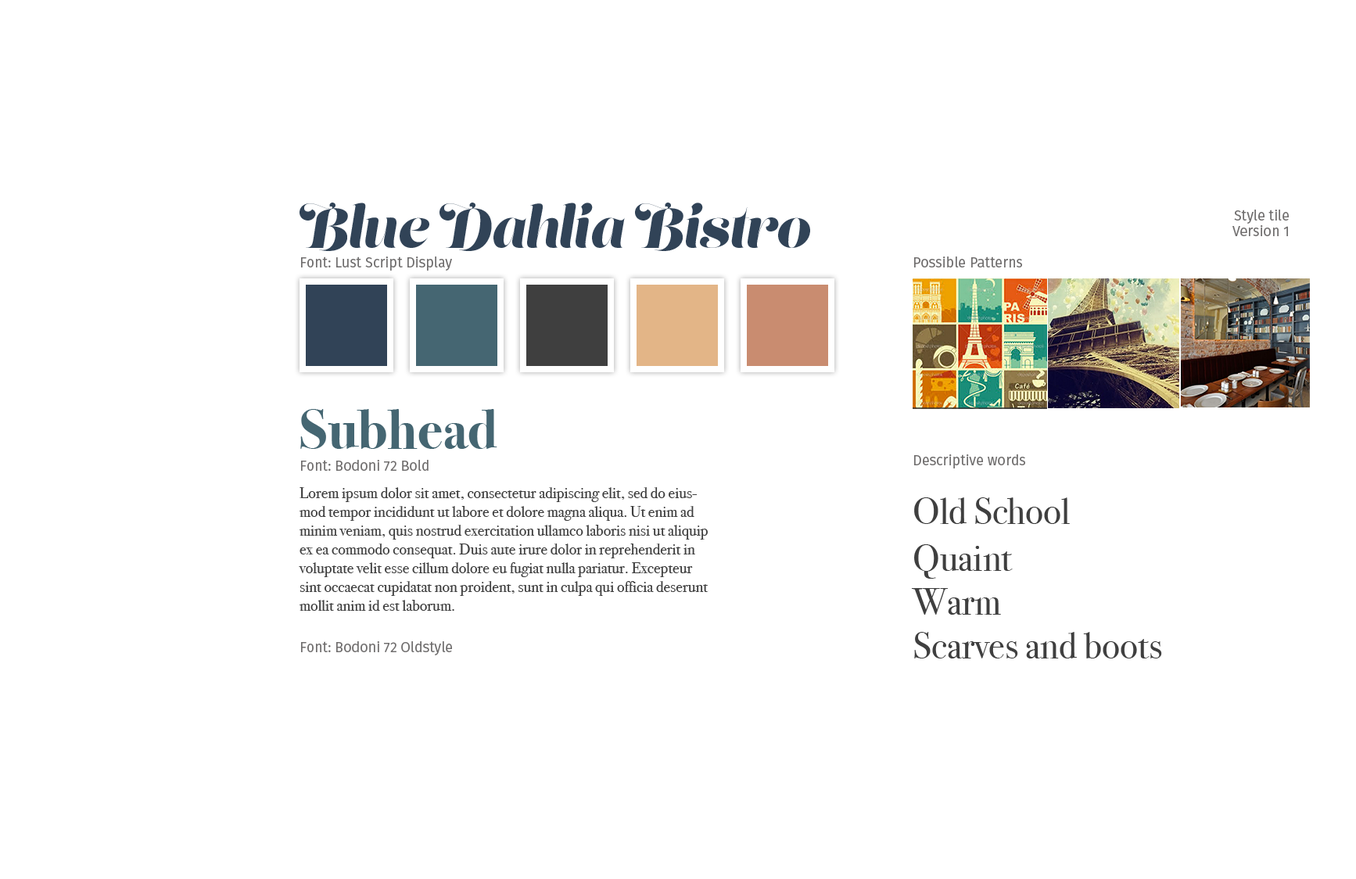
<style>
.page{position:relative;width:1356px;height:879px;background:#ffffff}
.page>*{position:absolute;margin:0}
.t1{font:56.3px "LustScriptDisplay";color:#314357}
.t2{font:14.1px/15.6px "FiraSans-Book";color:#706e6e}
.t3{font:14.1px "FiraSans-Book";color:#706e6e}
.t4{font:56.3px "BodoniSvtyTwoITCTT-Bold";color:#456672}
.t5{font:15.6px/18.8px "BodoniSvtyTwoOSITCTT-Book";color:#3f3f3f}
.t6{font:37.5px "BodoniSvtyTwoITCTT-Book";color:#3f3f3f}
</style>
<div class="page">
<p class="t1" style="left:300px;top:203px;width:510px;height:48px">Blue Dahlia Bistro</p>
<p class="t2" style="left:1233px;top:210px;width:56px;height:26px;text-align:right">Style tile<br>Version 1</p>
<p class="t3" style="left:301px;top:257px;width:151px;height:14px">Font: Lust Script Display</p>
<p class="t3" style="left:914px;top:257px;width:108px;height:11px">Possible Patterns</p>
<p class="t4" style="left:300px;top:409px;width:197px;height:40px">Subhead</p>
<p class="t3" style="left:301px;top:460px;width:128px;height:11px">Font: Bodoni 72 Bold</p>
<p class="t3" style="left:914px;top:454px;width:111px;height:15px">Descriptive words</p>
<p class="t5" style="left:299px;top:487px;width:410px;height:124px">Lorem ipsum dolor sit amet, consectetur adipiscing elit, sed do eiusmod tempor incididunt ut labore et dolore magna aliqua. Ut enim ad minim veniam, quis nostrud exercitation ullamco laboris nisi ut aliquip ex ea commodo consequat. Duis aute irure dolor in reprehenderit in voluptate velit esse cillum dolore eu fugiat nulla pariatur. Excepteur sint occaecat cupidatat non proident, sunt in culpa qui officia deserunt mollit anim id est laborum.</p>
<p class="t6" style="left:914px;top:497px;width:156px;height:27px">Old School</p>
<p class="t6" style="left:914px;top:544px;width:99px;height:35px">Quaint</p>
<p class="t6" style="left:911px;top:588px;width:90px;height:27px">Warm</p>
<p class="t3" style="left:301px;top:641px;width:151px;height:14px">Font: Bodoni 72 Oldstyle</p>
<p class="t6" style="left:914px;top:632px;width:248px;height:27px">Scarves and boots</p>
</div>
